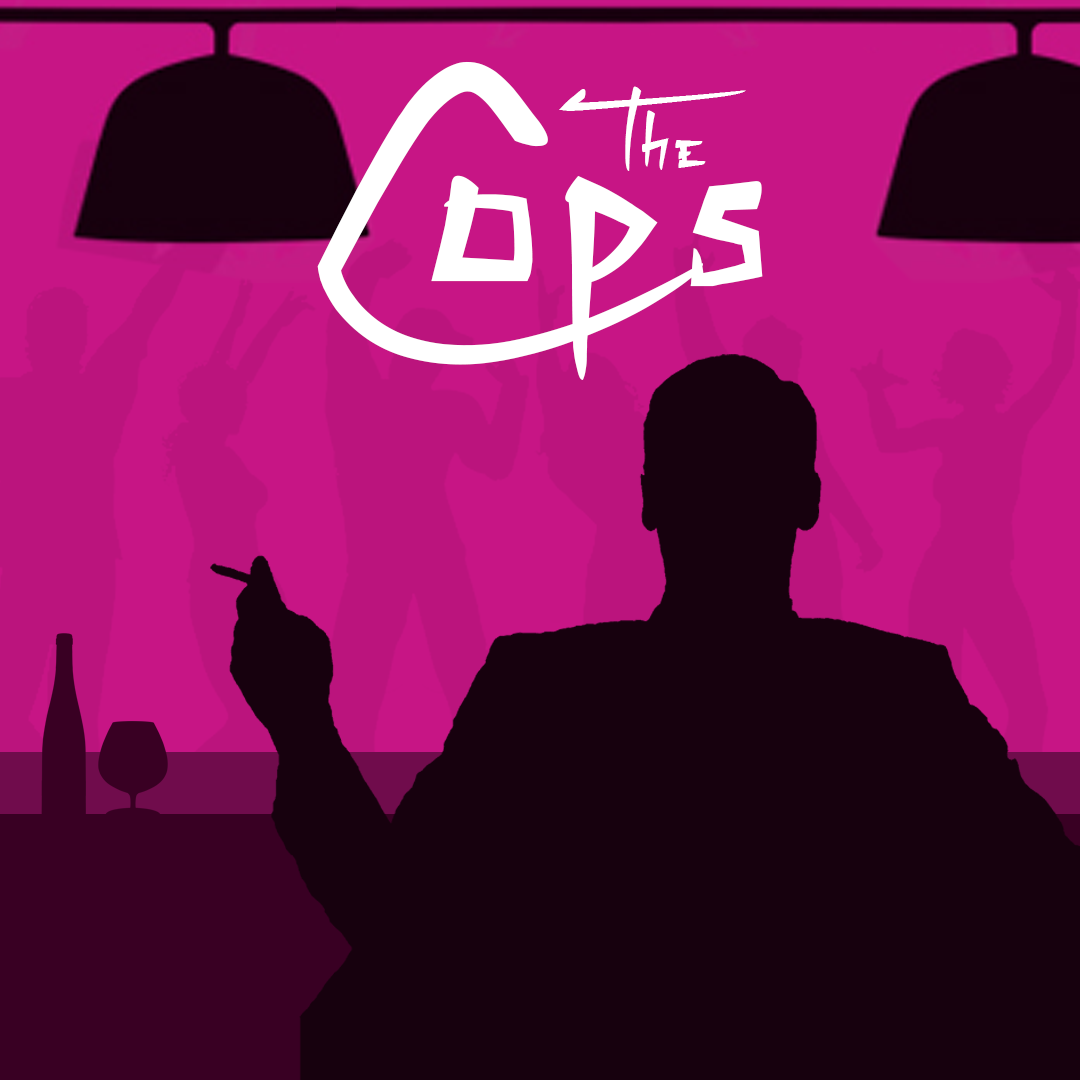
<style>
.page{position:relative;width:1080px;height:1080px;background:#17010e}
.page>*{position:absolute;margin:0}
.t1{font:305.9px "ZenzaiItachi";letter-spacing:0.102em;color:#ffffff;scale:0.96 1}
.t2{font:87.2px "ZenzaiItachi";letter-spacing:0.102em;color:#ffffff;scale:0.96 1}
</style>
<div class="page">
<p class="t1" style="left:317px;top:61px;width:446px;height:319px">Cops</p>
<p class="t2" style="left:559px;top:86px;width:187px;height:85px">The</p>
</div>
